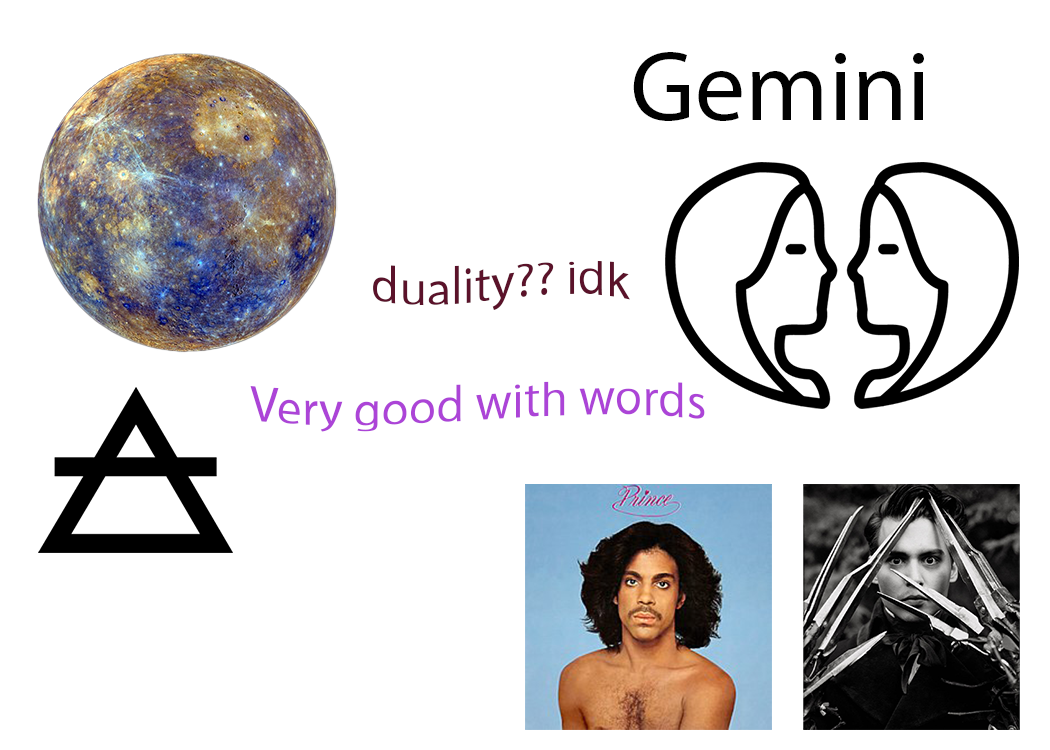
<style>
.page{position:relative;width:1050px;height:750px;background:#ffffff}
.page>*{position:absolute;margin:0}
.t1{font:100px "MyriadPro-Regular";color:#010101}
.t2{font:50px "MyriadPro-Regular";color:#5b122a}
.t3{font:50px "MyriadPro-Regular";color:#ac44d7}
</style>
<div class="page">
<p class="t1" style="left:633px;top:52px;width:291px;height:69px">Gemini</p>
<p class="t2" style="left:373px;top:260px;width:257px;height:50px">duality?? idk</p>
<p class="t3" style="left:250px;top:381px;width:455px;height:51px">Very good with words</p>
</div>
